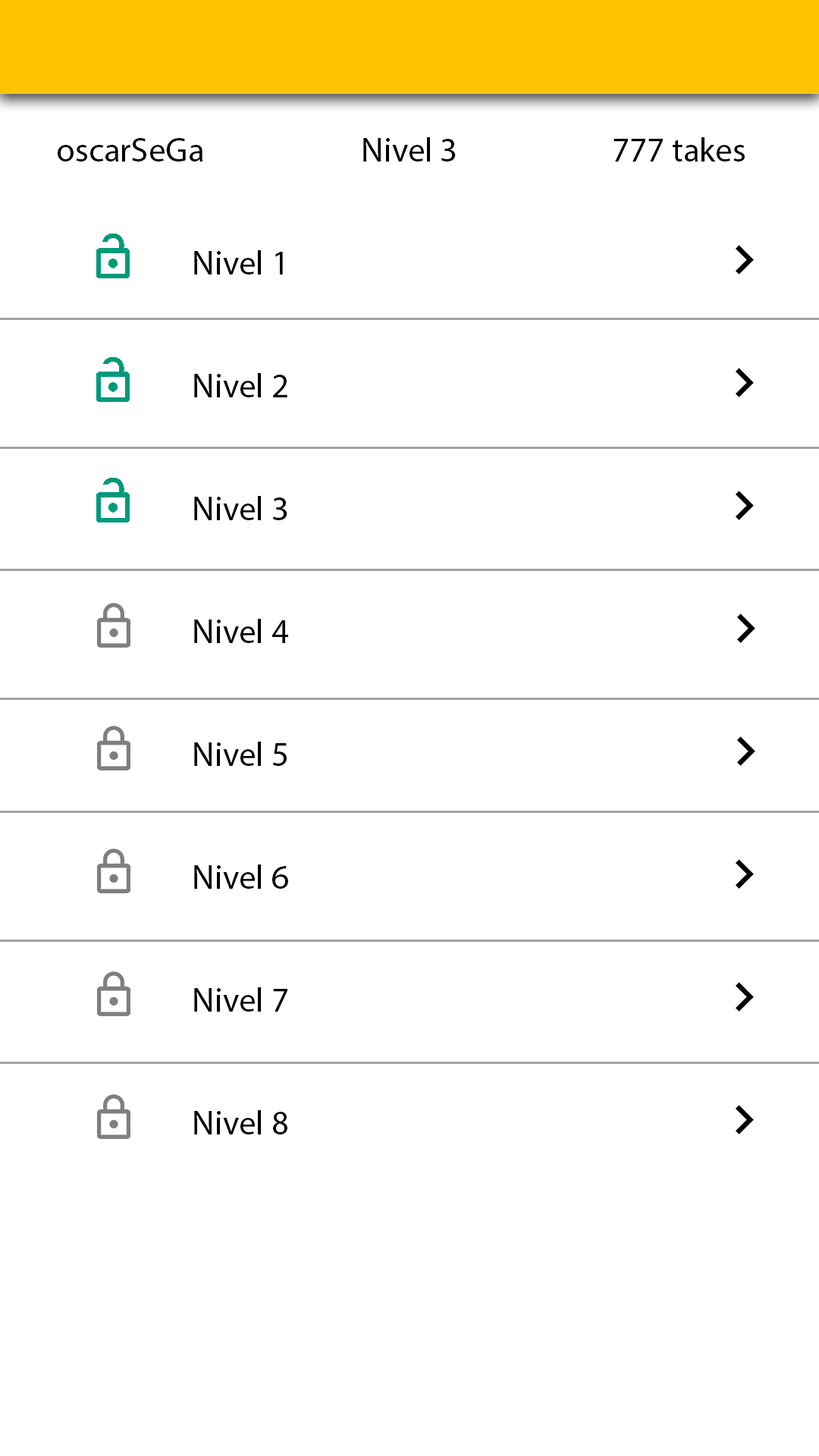
<style>
.page{position:relative;width:819px;height:1456px;background:#ffffff}
.page>*{position:absolute;margin:0}
.t1{font:34.1px "MyriadPro-Regular";color:#000000}
</style>
<div class="page">
<p class="t1" style="left:363px;top:137px;width:93px;height:25px">Nivel 3</p>
<p class="t1" style="left:613px;top:137px;width:132px;height:25px">777 takes</p>
<p class="t1" style="left:58px;top:138px;width:144px;height:24px">oscarSeGa</p>
<p class="t1" style="left:194px;top:250px;width:94px;height:884px">Nivel 1<br>  <br><br>Nivel 2<br>  <br><br>Nivel 3<br><br><br>Nivel 4<br><br><br>Nivel 5<br><br><br>Nivel 6<br><br><br>Nivel 7<br><br><br>Nivel 8</p>
</div>
